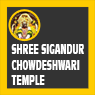
<style>
.page{position:relative;width:95px;height:95px;background:#333333}
.page>*{position:absolute;margin:0}
.t1{font:14px/15.4px "Incised901BT-Compact";color:#ffffff;text-transform:uppercase;scale:0.5 1}
</style>
<div class="page">
<p class="t1" style="left:11px;top:44px;width:73px;height:41px">SHrEE Sigandur <br>Chowdeshwari<br>temple</p>
</div>
